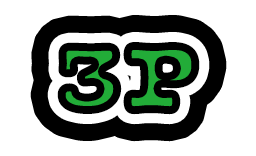
<style>
.page{position:relative;width:256px;height:156px;background:#ffffff}
.page>*{position:absolute;margin:0}
.t1{font:100px "Olivita-Regular";font-weight:bold}
</style>
<div class="page">
<p class="t1" style="left:57px;top:42px;width:143px;height:73px">3P</p>
</div>
